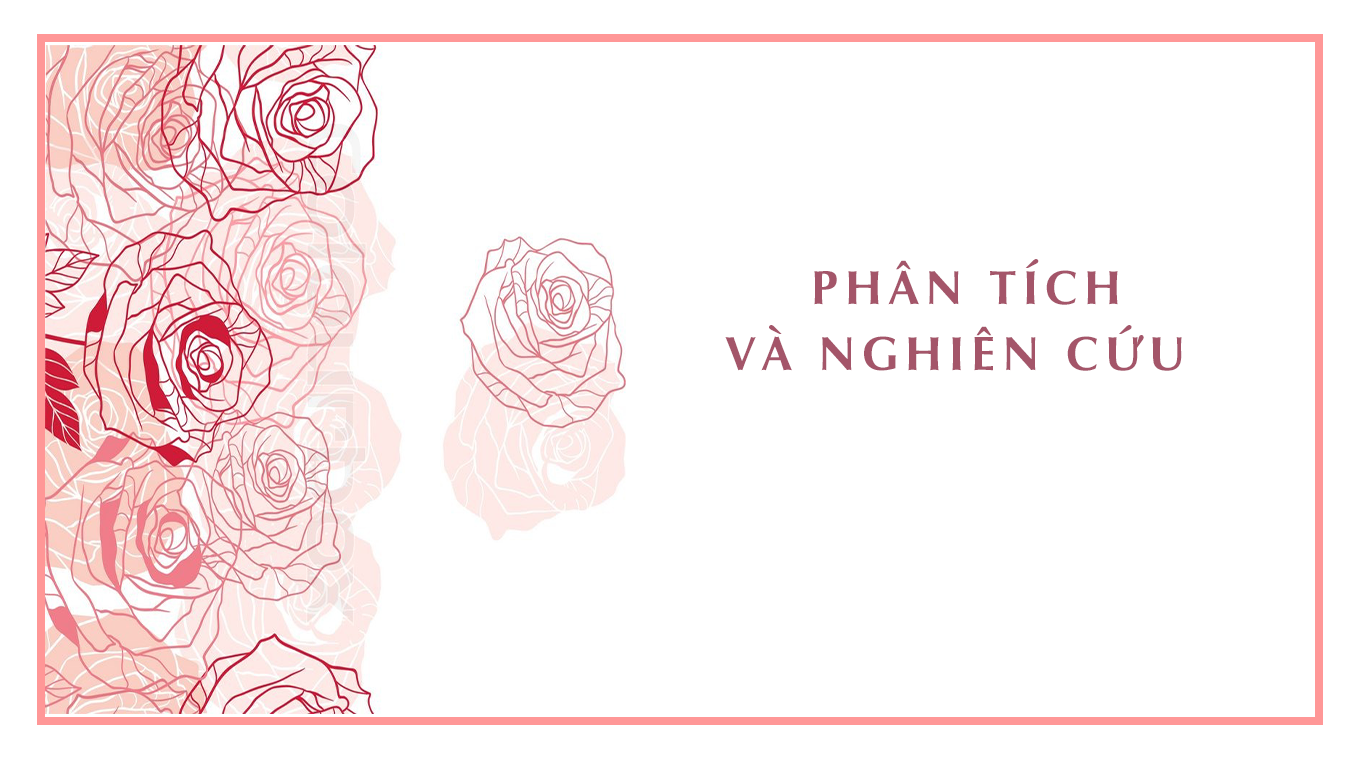
<style>
.page{position:relative;width:1366px;height:768px;background:#ffffff}
.page>*{position:absolute;margin:0}
.t1{font:48px/22px "UVNNhanBold";letter-spacing:0.15em;color:#a45569;text-transform:uppercase}
.t2{font:48px/22px "UVNNhanBold";letter-spacing:0.15em;color:#daee8a;text-transform:uppercase}
</style>
<div class="page">
<p class="t1" style="left:725px;top:259px;width:457px;height:112px;text-align:center"><span class="t2"> </span>phân tích <br><br><br>và nghiên cứu</p>
</div>
